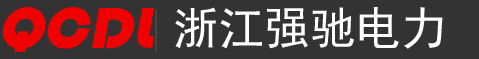
<style>
.page{position:relative;width:479px;height:59px;background:#333333}
.page>*{position:absolute;margin:0}
.t1{font:60px "STHupo";color:#f00001;font-style:italic}
.t2{font:45.5px "SimHei";color:#ffffff}
</style>
<div class="page">
<p class="t1" style="left:2px;top:7px;width:153px;height:45px">QCDL</p>
<p class="t2" style="left:175px;top:7px;width:268px;height:42px">浙江强驰电力</p>
</div>
